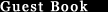
<style>
.page{position:relative;width:108px;height:12px;background:#000000}
.page>*{position:absolute;margin:0}
.t1{font:14px "Georgia";letter-spacing:0.1em;color:#ffffff;font-weight:bold}
</style>
<div class="page">
<p class="t1" style="left:0px;top:0px;width:88px;height:12px">Guest Book</p>
</div>
